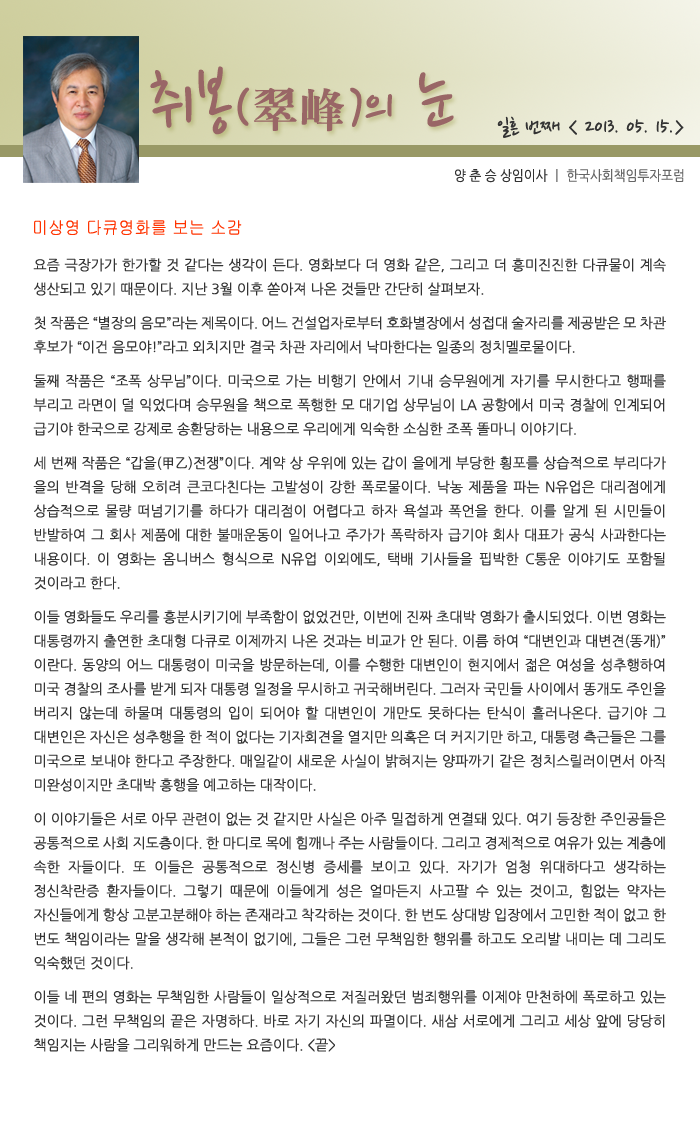
<style>
.page{position:relative;width:700px;height:1134px;background:#ffffff}
.page>*{position:absolute;margin:0}
.t1{font:77.5px "NanumPen";color:#996666}
.t2{font:60px "NanumPen";color:#996666}
.t3{font:48px "H2mjrE";color:#996666}
.t4{font:24px "NanumPen";color:#333333}
.t5{font:14px "NanumGothic";color:#666666;scale:0.9 1}
.t6{font:14px "NanumGothic";color:#333333;scale:0.9 1}
.t7{font:18px "Gulim";color:#ff3300;scale:0.9 1}
.t8{font:14px/24px "NanumGothic";color:#333333}
.t9{font:14px/10px "NanumGothic";color:#333333}
</style>
<div class="page">
<p class="t1" style="left:150px;top:66px;width:304px;height:69px">취봉<span class="t2">(</span><span class="t3">翠峰</span><span class="t2">)</span><span class="t2">의</span> 눈</p>
<p class="t4" style="left:497px;top:116px;width:187px;height:22px">일흔 번째 &lt; 2013. 05. 15.&gt;</p>
<p class="t5" style="left:455px;top:169px;width:229px;height:14px"><span class="t6">양 춘 승 상임이사 </span>ㅣ 한국사회책임투자포럼</p>
<p class="t7" style="left:34px;top:220px;width:208px;height:15px">미상영 다큐영화를 보는 소감</p>
<p class="t8" style="left:33px;top:258px;width:633px;height:794px;text-align:justify">요즘 극장가가 한가할 것 같다는 생각이 든다. 영화보다 더 영화 같은, 그리고 더 흥미진진한 다큐물이 계속 생산되고 있<span class="t9">기 때문이다. 지난 3월 이후 쏟아져 나온 것들만 간단히 살펴보자.<br><br>첫 작품은 “별장의 음</span>모”라는 제목이다. 어느 건설업자로부터 호화별장에서 성접대 술자리를 제공받은 모 차관 후보가<span class="t9"> “이건 음모야!”라고 외치지만 결국 차관 자리에서 낙마한다는 일종의 정치멜로물이다.<br><br>둘째 작품은 “조폭 상무님”이다.</span> 미국으로 가는 비행기 안에서 기내 승무원에게 자기를 무시한다고 행패를 부리고 라면이 덜 익었다며 승무원을 책으로 폭행한 모 대기업 상무님이 LA 공항에서 미국 경찰에 인계되어 급기야 한국<span class="t9">으로 강제로 송환당하는 내용으로 우리에게 익숙한 소심한 조폭 똘마니 이야기다. <br><br>세 번째 작품은 “갑을(</span>甲乙)전쟁”이다. 계약 상 우위에 있는 갑이 을에게 부당한 횡포를 상습적으로 부리다가 을의 반격을 당해 오히려 큰코다친다는 고발성이 강한 폭로물이다. 낙농 제품을 파는 N유업은 대리점에게 상습적으로 물량 떠넘기기를 하다가 대리점이 어렵다고 하자 욕설과 폭언을 한다. 이를 알게 된 시민들이 반발하여 그 회사 제품에 대한 불매운동이 일어나고 주가가 폭락하자 급기야 회사 대표가 공식 사과한다는 내용이다. 이 영화는 옴니버스 형식으로 N유업 이외에도, 택배 기사들을 핍박한 C통운 이야기도 포함될 것이라<span class="t9">고 한다.<br><br>이들 영화들도 우리</span>를 흥분시키기에 부족함이 없었건만, 이번에 진짜 초대박 영화가 출시되었다. 이번 영화는 대통령까지 출연한 초대형 다큐로 이제까지 나온 것과는 비교가 안 된다. 이름 하여 “대변인과 대변견(똥개)”이란다. 동양의 어느 대통령이 미국을 방문하는데, 이를 수행한 대변인이 현지에서 젊은 여성을 성추행하여 미국 경찰의 조사를 받게 되자 대통령 일정을 무시하고 귀국해버린다. 그러자 국민들 사이에서 똥개도 주인을 버리지 않는데 하물며 대통령의 입이 되어야 할 대변인이 개만도 못하다는 탄식이 흘러나온다. 급기야 그 대변인은 자신은 성추행을 한 적이 없다는 기자회견을 열지만 의혹은 더 커지기만 하고, 대통령 측근들은 그를 미국으로 보내야 한다고 주장한다. 매일같이 새로운 사실이 밝혀지는 양파까기 같은 정치스릴러이면서 아직 미완성이지만 초대박 흥<span class="t9">행을 예고하는 대작이다. <br><br>이 이야기들은 서로 아무 관련이 없는 </span>것 같지만 사실은 아주 밀접하게 연결돼 있다. 여기 등장한 주인공들은 공통적으로 사회 지도층이다. 한 마디로 목에 힘깨나 주는 사람들이다. 그리고 경제적으로 여유가 있는 계층에 속한 자들이다. 또 이들은 공통적으로 정신병 증세를 보이고 있다. 자기가 엄청 위대하다고 생각하는 정신착란증 환자들이다. 그렇기 때문에 이들에게 성은 얼마든지 사고팔 수 있는 것이고, 힘없는 약자는 자신들에게 항상 고분고분해야 하는 존재라고 착각하는 것이다. 한 번도 상대방 입장에서 고민한 적이 없고 한 번도 책임이라는 말을 생각해 본적이 없기에, 그들은 그런 무책임한 행위를 하고도 오리발 내미는 데 그리도 익숙했던<span class="t9"> 것이다.<br><br>이들 네 편의 영</span>화는 무책임한 사람들이 일상적으로 저질러왔던 범죄행위를 이제야 만천하에 폭로하고 있는 것이다. 그런 무책임의 끝은 자명하다. 바로 자기 자신의 파멸이다. 새삼 서로에게 그리고 세상 앞에 당당히 책임지는 사람을 그리워하게 만드는 요즘이다. &lt;끝&gt;</p>
</div>
